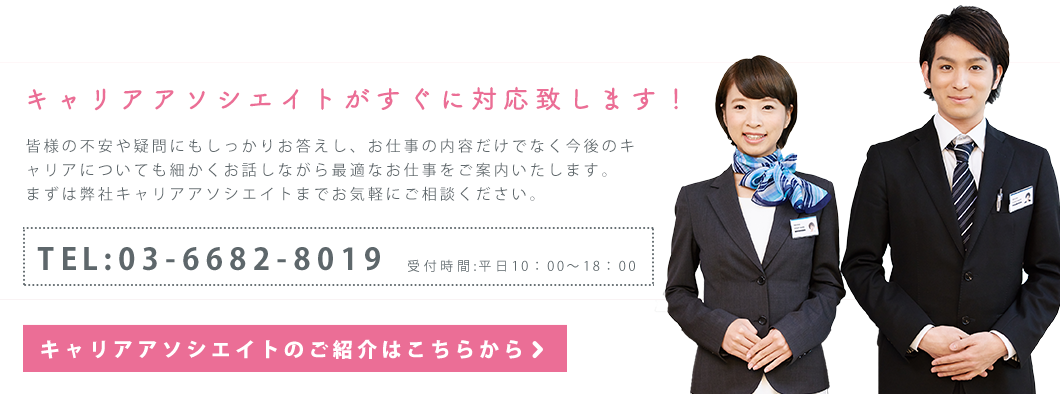
<style>
.page{position:relative;width:1060px;height:394px;background:#ffffff}
.page>*{position:absolute;margin:0}
.t1{font:26px "TsukuBRdGothic-Regular";letter-spacing:0.2em;color:#eb6e96;font-weight:bold}
.t2{font:15px/24px "KozGoPr6N-Regular";letter-spacing:0.2em;color:#5e676b}
.t3{font:30px "KozGoPr6N-Bold";letter-spacing:0.2em;color:#5e676b}
.t4{font:13px "KozGoPr6N-Regular";letter-spacing:0.2em;color:#5e676b}
.t5{font:20.3px "KozGoPr6N-Heavy";letter-spacing:0.2em;color:#ffffff}
</style>
<div class="page">
<p class="t1" style="left:28px;top:86px;width:650px;height:25px">キャリアアソシエイトがすぐに対応致します！</p>
<p class="t2" style="left:26px;top:138px;width:608px;height:63px">皆様の不安や疑問にもしっかりお答えし、お仕事の内容だけでなく今後のキャリアについても細かくお話しながら最適なお仕事をご案内いたします。<br>まずは弊社キャリアアソシエイトまでお気軽にご相談ください。</p>
<p class="t3" style="left:37px;top:247px;width:343px;height:24px">TEL:03-6682-8019</p>
<p class="t4" style="left:408px;top:259px;width:227px;height:13px">受付時間:平日10：00～18：00</p>
<p class="t5" style="left:41px;top:339px;width:480px;height:20px">キャリアアソシエイトのご紹介はこちらから</p>
</div>
